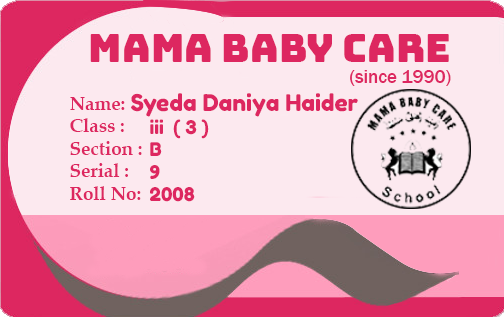
<style>
.page{position:relative;width:504px;height:317px;background:#fce9ef}
.page>*{position:absolute;margin:0}
.t1{font:39.3px "Bungee-Regular";color:#dd2760}
.t2{font:18.8px "FranklinGothic-Medium";color:#dd2760}
.t3{font:18.8px "PalatinoLinotype-Bold";color:#dd2760}
.t4{font:18.8px "FredokaOne-Regular";color:#dd2760}
.t5{font:22.9px "FredokaOne-Regular";color:#dd2760}
</style>
<div class="page">
<p class="t1" style="left:90px;top:34px;width:359px;height:28px">Mama Baby Care</p>
<p class="t2" style="left:350px;top:70px;width:101px;height:16px">(since 1990)</p>
<p class="t3" style="left:70px;top:97px;width:72px;height:103px">Name: <br>Class :<br>Section : <br>Serial :<br>Roll No:</p>
<p class="t4" style="left:131px;top:93px;width:227px;height:109px"><span class="t5">Syeda Daniya Haider<br></span>    iii  ( 3 ) <br>    B<br>    9<br>    2008</p>
</div>
